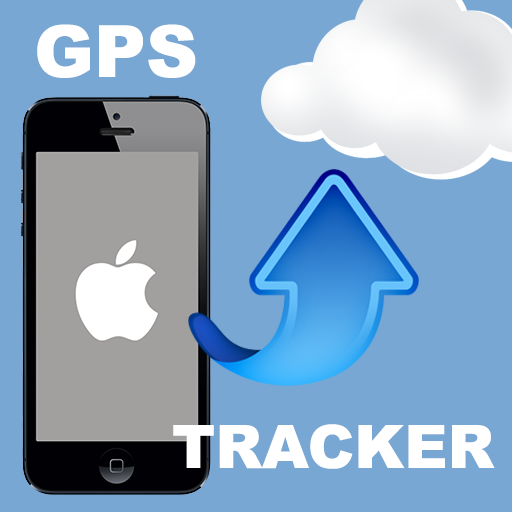
<style>
.page{position:relative;width:512px;height:512px;background:#79a7d3}
.page>*{position:absolute;margin:0}
.t1{font:72px "Arial-Black";color:#ffffff}
.t2{font:60px "Arial-Black";color:#ffffff}
</style>
<div class="page">
<p class="t1" style="left:37px;top:24px;width:159px;height:54px">GPS</p>
<p class="t2" style="left:173px;top:424px;width:322px;height:45px">TRACKER</p>
</div>
